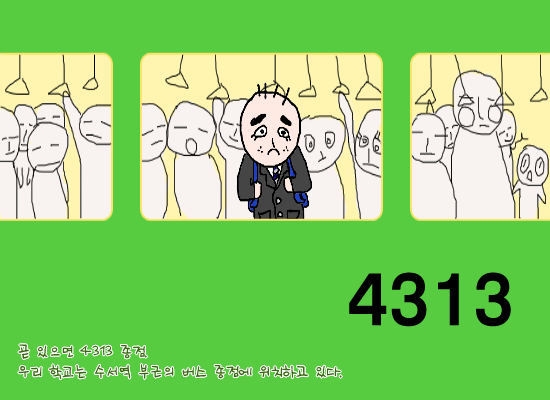
<style>
.page{position:relative;width:550px;height:400px;background:#58cc41}
.page>*{position:absolute;margin:0}
.t1{font:72px "KyunKo";color:#000000;scale:0.9 1}
.t2{font:18px "Na@Sanha";color:#36660e;scale:0.9 1}
</style>
<div class="page">
<p class="t1" style="left:349px;top:272px;width:162px;height:55px">4313</p>
<p class="t2" style="left:18px;top:344px;width:129px;height:15px">곧 있으면 4313 종점.</p>
<p class="t2" style="left:18px;top:364px;width:324px;height:15px">우리 학교는 수서역 부근의 버스 종점에 위치하고 있다.</p>
</div>
